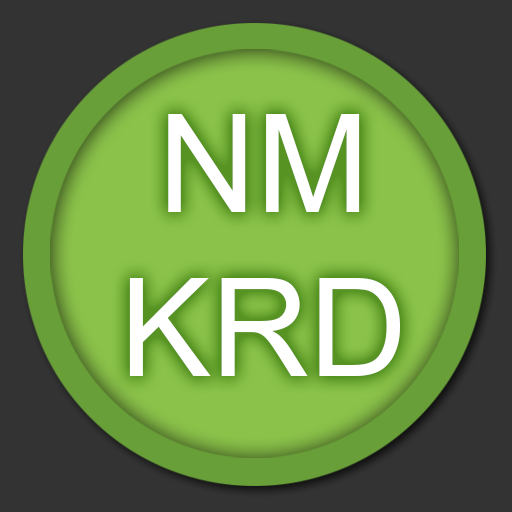
<style>
.page{position:relative;width:512px;height:512px;background:#333333}
.page>*{position:absolute;margin:0}
.t1{font:136.2px "ArialMT";color:#ffffff}
</style>
<div class="page">
<p class="t1" style="left:129px;top:114px;width:271px;height:262px;text-align:center">NM<br>KRD</p>
</div>
